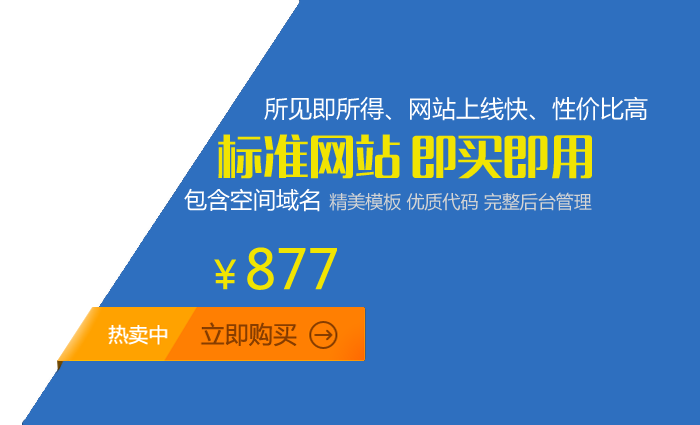
<style>
.page{position:relative;width:700px;height:425px;background:#2e6fbf}
.page>*{position:absolute;margin:0}
.t1{font:24px "MicrosoftYaHei";color:#ffffff}
.t2{font:46px "MFLangQian_Noncommercial-Regular";color:#f1e402}
.t3{font:18px "MicrosoftYaHei";color:#d4d4d4}
.t4{font:23px "MicrosoftYaHei";color:#ffffff}
.t5{font:54px "MicrosoftYaHei";color:#f1e402}
.t6{font:39px "MicrosoftYaHei";color:#f1e402}
</style>
<div class="page">
<p class="t1" style="left:264px;top:96px;width:384px;height:25px">所见即所得、网站上线快、性价比高</p>
<p class="t2" style="left:218px;top:134px;width:374px;height:45px">标准网站 即买即用</p>
<p class="t3" style="left:184px;top:188px;width:408px;height:24px"><span class="t4">包含空间域名 </span>精美模板 优质代码 完整后台管理</p>
<p class="t5" style="left:214px;top:247px;width:123px;height:43px"><span class="t6">￥</span>877</p>
</div>
